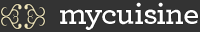
<style>
.page{position:relative;width:200px;height:32px;background:#333333}
.page>*{position:absolute;margin:0}
.t1{font:33px "ArcherPro-Semibold";letter-spacing:-0.025em;color:#ffffff}
</style>
<div class="page">
<p class="t1" style="left:60px;top:2px;width:138px;height:28px">mycuisine</p>
</div>
